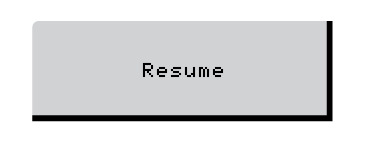
<style>
.page{position:relative;width:375px;height:142px;background:#d1d2d4}
.page>*{position:absolute;margin:0}
.t1{font:16px "Mono0756";color:#000000}
</style>
<div class="page">
<p class="t1" style="left:142px;top:62px;width:82px;height:16px">Resume</p>
</div>
